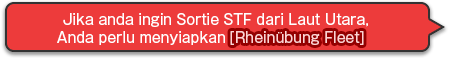
<style>
.page{position:relative;width:450px;height:58px;background:#ed3b3b}
.page>*{position:absolute;margin:0}
.t1{font:14px/18px "GothicMB101Pro-Regular"}
.t2{font:14px/18px "GothicMB101Pro-Regular";color:#ffffff}
</style>
<div class="page">
<p class="t1" style="left:49px;top:13px;width:334px;height:32px;text-align:center">If you want to sortie a STF from the North Sea,<br>you need to set up the [Rheinübung Fleet].</p>
<p class="t2" style="left:57px;top:13px;width:311px;height:32px;text-align:center">Jika anda ingin Sortie STF dari Laut Utara,<br>Anda perlu menyiapkan</p>
</div>
